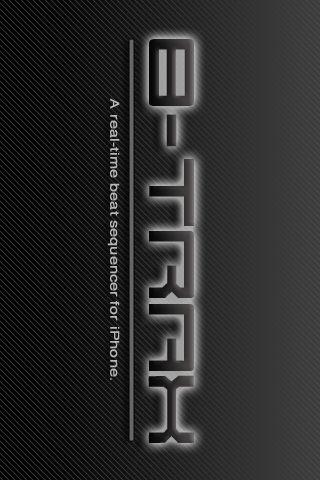
<style>
.page{position:relative;width:320px;height:480px}
.page>*{position:absolute;margin:0}
.t1{font:48px "Legion";font-weight:bold}
.t2{font:12px "Helvetica";color:#b7b7b7;font-weight:bold;scale:1.3 1}
</style>
<div class="page">
<p class="t1" style="left:148px;top:39px;width:46px;height:404px;rotate:90deg">8-TRax</p>
<p class="t2" style="left:107px;top:98px;width:13px;height:282px;rotate:90deg">A real-time beat sequencer for iPhone.</p>
</div>
